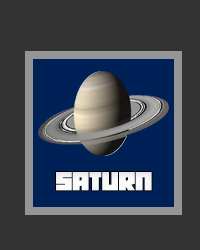
<style>
.page{position:relative;width:200px;height:250px;background:#333333}
.page>*{position:absolute;margin:0}
.t1{font:26.4px "RobotRadicals";color:#ffffff}
</style>
<div class="page">
<p class="t1" style="left:56px;top:172px;width:96px;height:19px">saturn</p>
</div>
